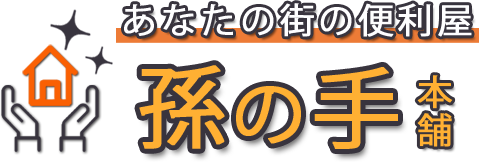
<style>
.page{position:relative;width:479px;height:162px;background:#ffffff}
.page>*{position:absolute;margin:0}
.t1{font:35px "KozGoPr6N-Regular";letter-spacing:0.1em;color:#fefeff;font-weight:bold}
.t2{font:88.5px "KozGoPr6N-Regular";letter-spacing:0.1em;color:#ffb033;font-weight:bold}
.t3{font:72.7px "KozGoPr6N-Regular";letter-spacing:0.1em;color:#ffb033;font-weight:bold}
.t4{font:35px/36px "KozGoPr6N-Regular";letter-spacing:0.1em;color:#ffb033;font-weight:bold}
</style>
<div class="page">
<p class="t1" style="left:124px;top:3px;width:348px;height:34px">あなたの街の便利屋</p>
<p class="t2" style="left:139px;top:65px;width:259px;height:84px">孫<span class="t3">の</span>手</p>
<p class="t4" style="left:417px;top:75px;width:36px;height:72px">本舗</p>
</div>
